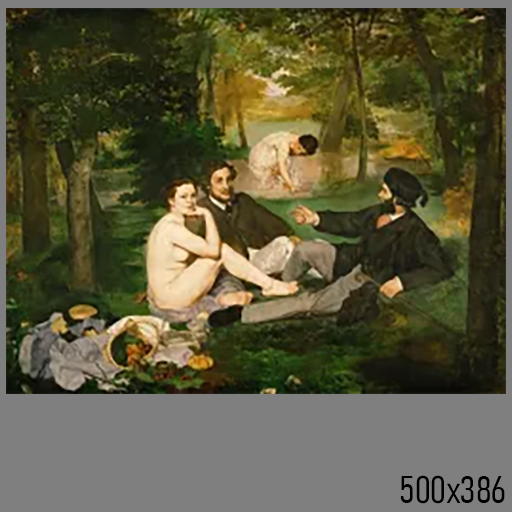
<style>
.page{position:relative;width:512px;height:512px;background:#7f7f7f}
.page>*{position:absolute;margin:0}
.t1{font:38px "Bahnschrift-LightCondensed";color:#000000}
</style>
<div class="page">
<p class="t1" style="left:400px;top:475px;width:105px;height:29px">500x386</p>
</div>
